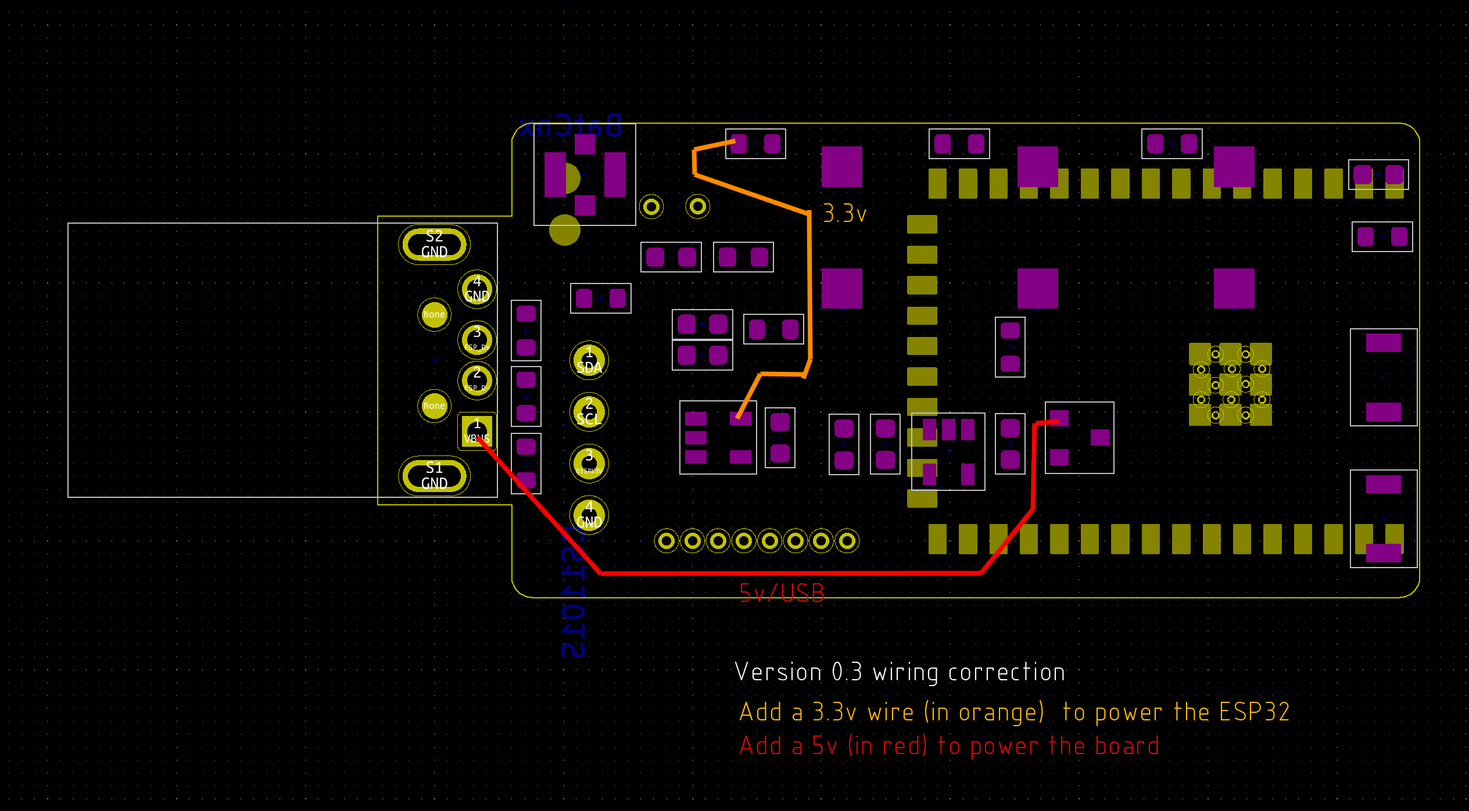
<style>
.page{position:relative;width:1469px;height:811px;background:#000000}
.page>*{position:absolute;margin:0}
.t1{font:27.9px "SWIsop3";color:#ffc000}
.t2{font:27.9px "SWIsop3";color:#e30808}
.t3{font:27.9px "SWIsop3";color:#ffffff}
</style>
<div class="page">
<p class="t1" style="left:824px;top:203px;width:43px;height:19px">3.3v</p>
<p class="t2" style="left:741px;top:584px;width:83px;height:18px">5v/USB</p>
<p class="t3" style="left:735px;top:662px;width:329px;height:24px">Version 0.3 wiring correction</p>
<p class="t1" style="left:740px;top:700px;width:549px;height:60px">Add a 3.3v wire (in orange)  to power the ESP32<br><span class="t2">Add a 5v (in red) to power the board</span></p>
</div>
